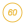
<style>
.page{position:relative;width:25px;height:25px;background:#ffffff}
.page>*{position:absolute;margin:0}
.t1{font:8px "HelveticaNeue-LightItalic";color:#edc051;font-weight:bold}
</style>
<div class="page">
<p class="t1" style="left:8px;top:9px;width:10px;height:7px">60</p>
</div>
